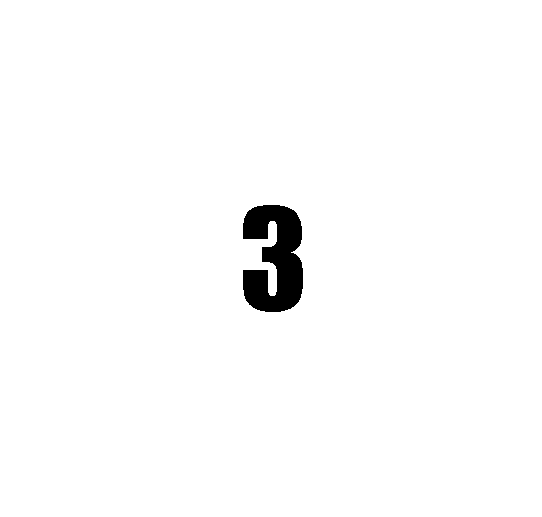
<style>
.page{position:relative;width:542px;height:517px;background:#ffffff}
.page>*{position:absolute;margin:0}
.t1{font:130px "Impact";color:#000000}
</style>
<div class="page">
<p class="t1" style="left:243px;top:205px;width:60px;height:107px">3</p>
</div>
